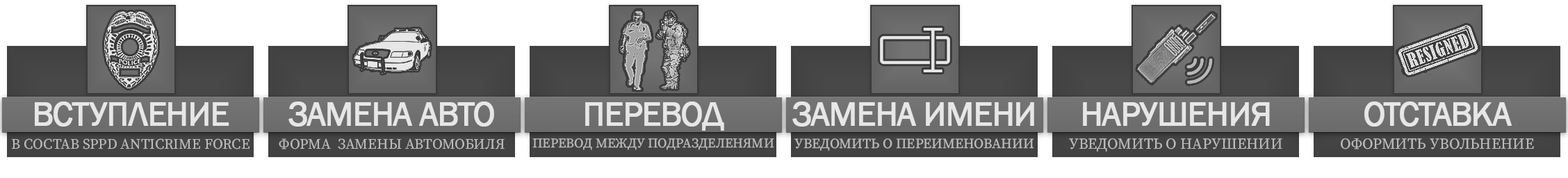
<style>
.page{position:relative;width:1568px;height:178px;background:#ffffff}
.page>*{position:absolute;margin:0}
.t1{font:34.8px "FranklinGothic-Book";letter-spacing:-0.04em;color:#e6e6e6;text-transform:uppercase;font-weight:bold}
.t2{font:13.2px "SourceSerifRoman-Regular";color:#bcbcbc;text-transform:uppercase}
.t3{font:14.6px "SourceSerifRoman-Regular";color:#bcbcbc;text-transform:uppercase}
.t4{font:13.9px "SourceSerifRoman-Regular";color:#bcbcbc;text-transform:uppercase}
.t5{font:15.3px "SourceSerifRoman-Regular";color:#bcbcbc;text-transform:uppercase}
</style>
<div class="page">
<p class="t1" style="left:35px;top:101px;width:194px;height:25px">ВСТУПЛЕНИЕ</p>
<p class="t1" style="left:288px;top:101px;width:206px;height:25px">ЗАМЕНА авто</p>
<p class="t1" style="left:585px;top:101px;width:139px;height:30px">перевод</p>
<p class="t1" style="left:792px;top:101px;width:242px;height:25px">ЗАМЕНА ИМЕНИ</p>
<p class="t1" style="left:1364px;top:101px;width:148px;height:25px">ОТСТАВКА</p>
<p class="t1" style="left:1083px;top:102px;width:187px;height:24px">НАРУШЕНИЯ</p>
<p class="t2" style="left:532px;top:138px;width:242px;height:12px">Перевод между подразделенями</p>
<p class="t3" style="left:12px;top:138px;width:238px;height:11px">в состав SPPD ANtiCrime Force</p>
<p class="t3" style="left:279px;top:138px;width:226px;height:11px">форма  замены автомобиля</p>
<p class="t4" style="left:794px;top:138px;width:240px;height:13px">Уведомить о переименовании</p>
<p class="t5" style="left:1069px;top:138px;width:213px;height:14px">Уведомить о нарушении</p>
<p class="t5" style="left:1341px;top:138px;width:193px;height:11px">Оформить увольнение</p>
</div>
